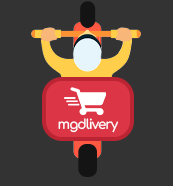
<style>
.page{position:relative;width:173px;height:186px;background:#333333}
.page>*{position:absolute;margin:0}
.t1{font:13.5px "Comfortaa-Bold";letter-spacing:-0.08em;color:#ffffff}
</style>
<div class="page">
<p class="t1" style="left:58px;top:118px;width:60px;height:15px">mgdlivery</p>
</div>
